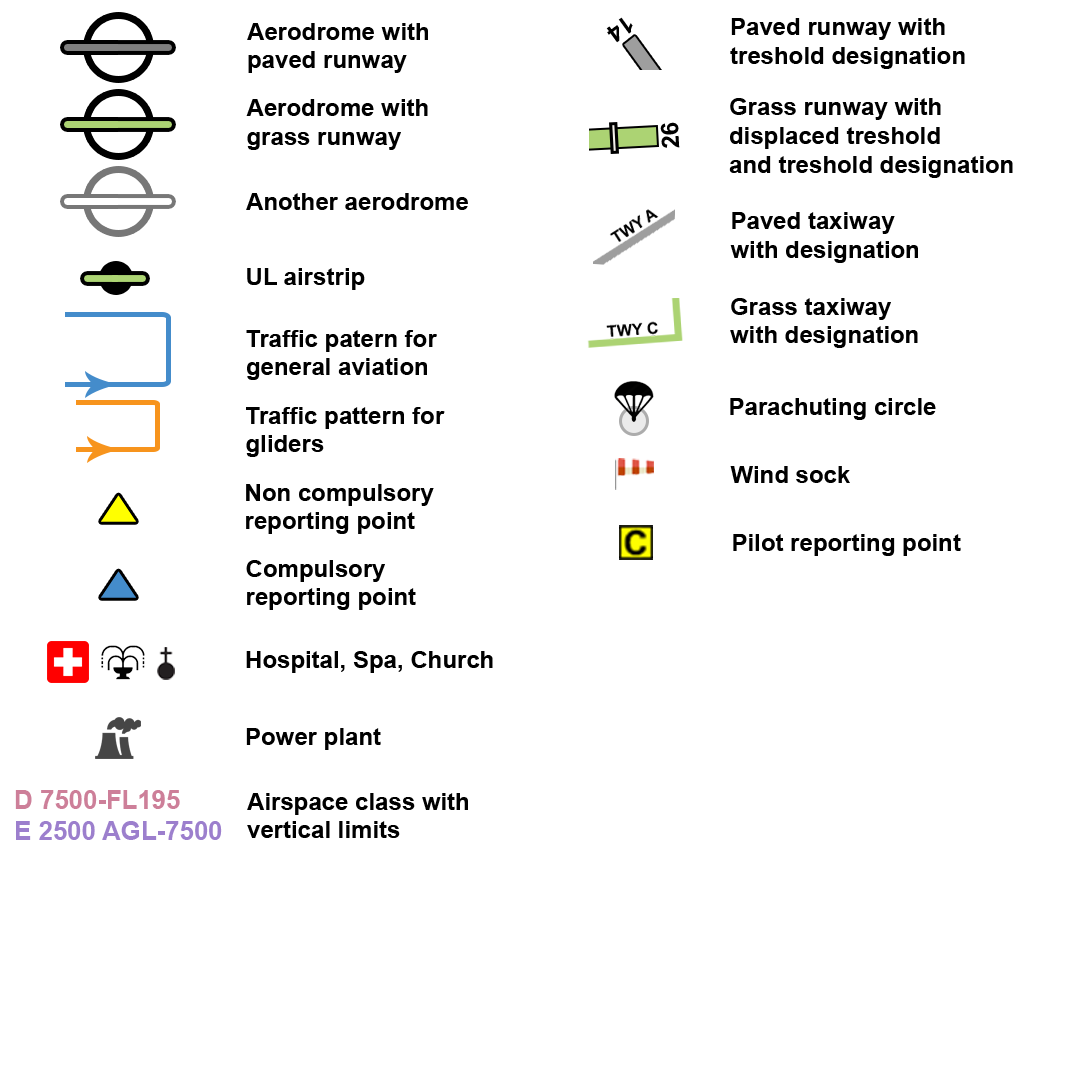
<style>
.page{position:relative;width:1080px;height:1080px;background:#ffffff}
.page>*{position:absolute;margin:0}
.t1{font:24px "Arial-BoldMT";color:#000000}
</style>
<div class="page">
<p class="t1" style="left:247px;top:23px;width:181px;height:50px">Aerodrome with<br>paved runway</p>
<p class="t1" style="left:730px;top:18px;width:235px;height:51px">Paved runway with<br>treshold designation</p>
<p class="t1" style="left:246px;top:99px;width:182px;height:51px">Aerodrome with<br>grass runway</p>
<p class="t1" style="left:729px;top:98px;width:284px;height:80px">Grass runway with<br>displaced treshold <br>and treshold designation</p>
<p class="t1" style="left:246px;top:193px;width:222px;height:17px">Another aerodrome</p>
<p class="t1" style="left:730px;top:212px;width:188px;height:51px">Paved taxiway<br>with designation</p>
<p class="t1" style="left:247px;top:268px;width:118px;height:22px">UL airstrip</p>
<p class="t1" style="left:730px;top:298px;width:188px;height:50px">Grass taxiway<br>with designation</p>
<p class="t1" style="left:246px;top:330px;width:191px;height:50px">Traffic patern for<br>general aviation</p>
<p class="t1" style="left:730px;top:398px;width:206px;height:22px">Parachuting circle</p>
<p class="t1" style="left:246px;top:407px;width:199px;height:50px">Traffic pattern for<br>gliders</p>
<p class="t1" style="left:730px;top:466px;width:120px;height:17px">Wind sock</p>
<p class="t1" style="left:246px;top:484px;width:188px;height:50px">Non compulsory <br>reporting point</p>
<p class="t1" style="left:733px;top:534px;width:228px;height:22px">Pilot reporting point</p>
<p class="t1" style="left:246px;top:560px;width:170px;height:50px">Compulsory <br>reporting point</p>
<p class="t1" style="left:246px;top:651px;width:247px;height:22px">Hospital, Spa, Church</p>
<p class="t1" style="left:246px;top:728px;width:135px;height:22px">Power plant</p>
<p class="t1" style="left:247px;top:793px;width:221px;height:45px">Airspace class with<br>vertical limits</p>
</div>
